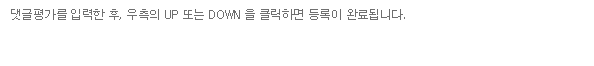
<style>
.page{position:relative;width:594px;height:66px;background:#ffffff}
.page>*{position:absolute;margin:0}
.t1{font:12px "Dotum";letter-spacing:-0.05em;color:#6f6f6f}
</style>
<div class="page">
<p class="t1" style="left:11px;top:9px;width:394px;height:11px">댓글평가를 입력한 후, 우측의 UP 또는 DOWN 을 클릭하면 등록이 완료됩니다.</p>
</div>
